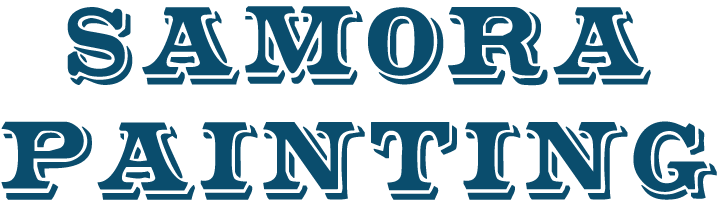
<style>
.page{position:relative;width:721px;height:206px;background:#ffffff}
.page>*{position:absolute;margin:0}
.t1{font:96px "Shadowed-Serif";color:#0a4d6d;font-weight:bold}
</style>
<div class="page">
<p class="t1" style="left:1px;top:6px;width:716px;height:194px;text-align:center">Samora<br>Painting</p>
</div>
